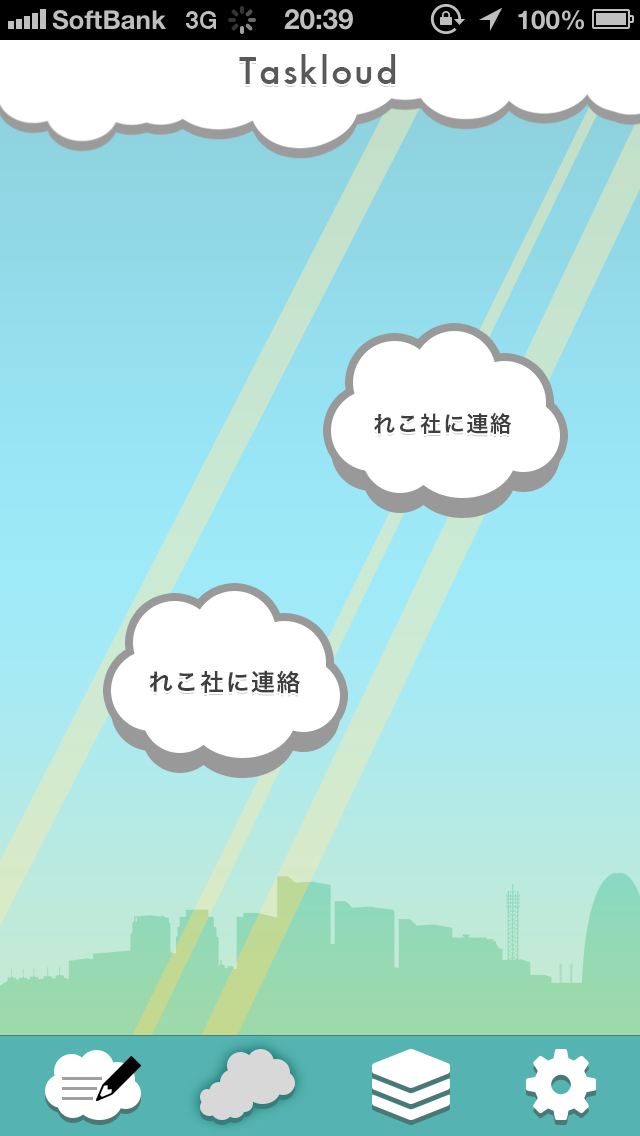
<style>
.page{position:relative;width:640px;height:1136px}
.page>*{position:absolute;margin:0}
.t1{font:36px "Futura-Medium";letter-spacing:0.06em;color:#595959}
.t2{font:22px "HiraKakuPro-W6";letter-spacing:0.06em;color:#454545}
.t3{font:24px "HiraKakuPro-W6";letter-spacing:0.06em;color:#454545}
</style>
<div class="page">
<p class="t1" style="left:239px;top:54px;width:157px;height:30px">Taskloud</p>
<p class="t2" style="left:374px;top:412px;width:138px;height:23px">れこ社に連絡</p>
<p class="t3" style="left:149px;top:670px;width:151px;height:24px">れこ社に連絡</p>
</div>
